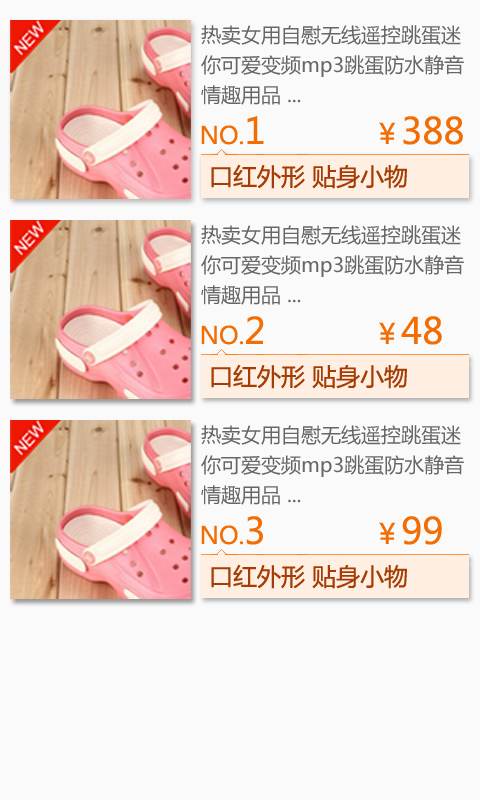
<style>
.page{position:relative;width:480px;height:800px;background:#fafafa}
.page>*{position:absolute;margin:0}
.t1{font:20px/30px "MicrosoftYaHei";color:#666666}
.t2{font:24px "MicrosoftYaHei";color:#f26e05}
.t3{font:36px "MicrosoftYaHei";color:#f26e05}
.t4{font:28px "MicrosoftYaHei";color:#f26e05}
.t5{font:24px "MicrosoftYaHei";color:#a53c03}
</style>
<div class="page">
<p class="t1" style="left:201px;top:25px;width:263px;height:80px">热卖女用自慰无线遥控跳蛋迷<br>你可爱变频mp3跳蛋防水静音<br>情趣用品 ...</p>
<p class="t2" style="left:201px;top:116px;width:262px;height:29px">NO.<span class="t3">1</span><span class="t4">             ￥</span><span class="t3">388</span></p>
<p class="t5" style="left:211px;top:164px;width:196px;height:25px">口红外形 贴身小物</p>
<p class="t1" style="left:201px;top:225px;width:263px;height:80px">热卖女用自慰无线遥控跳蛋迷<br>你可爱变频mp3跳蛋防水静音<br>情趣用品 ...</p>
<p class="t2" style="left:201px;top:316px;width:241px;height:29px">NO.<span class="t3">2</span><span class="t4">             ￥</span><span class="t3">48</span></p>
<p class="t5" style="left:211px;top:364px;width:196px;height:25px">口红外形 贴身小物</p>
<p class="t1" style="left:201px;top:425px;width:263px;height:80px">热卖女用自慰无线遥控跳蛋迷<br>你可爱变频mp3跳蛋防水静音<br>情趣用品 ...</p>
<p class="t2" style="left:201px;top:516px;width:241px;height:29px">NO.<span class="t3">3</span><span class="t4">             ￥</span><span class="t3">99</span></p>
<p class="t5" style="left:211px;top:564px;width:196px;height:25px">口红外形 贴身小物</p>
</div>
